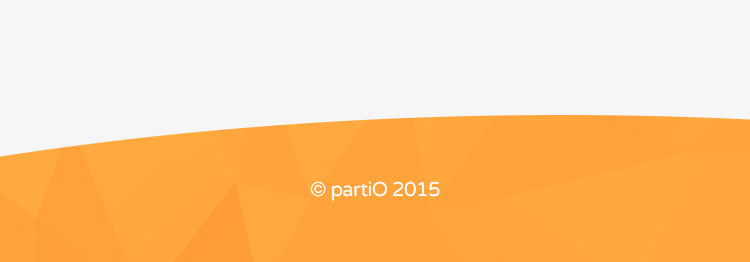
<style>
.page{position:relative;width:750px;height:262px;background:#f6f6f6}
.page>*{position:absolute;margin:0}
.t1{font:20px "VarelaRound-Regular";letter-spacing:-0.028em;color:#ffffff}
</style>
<div class="page">
<p class="t1" style="left:310px;top:181px;width:130px;height:20px">© partiO 2015</p>
</div>
